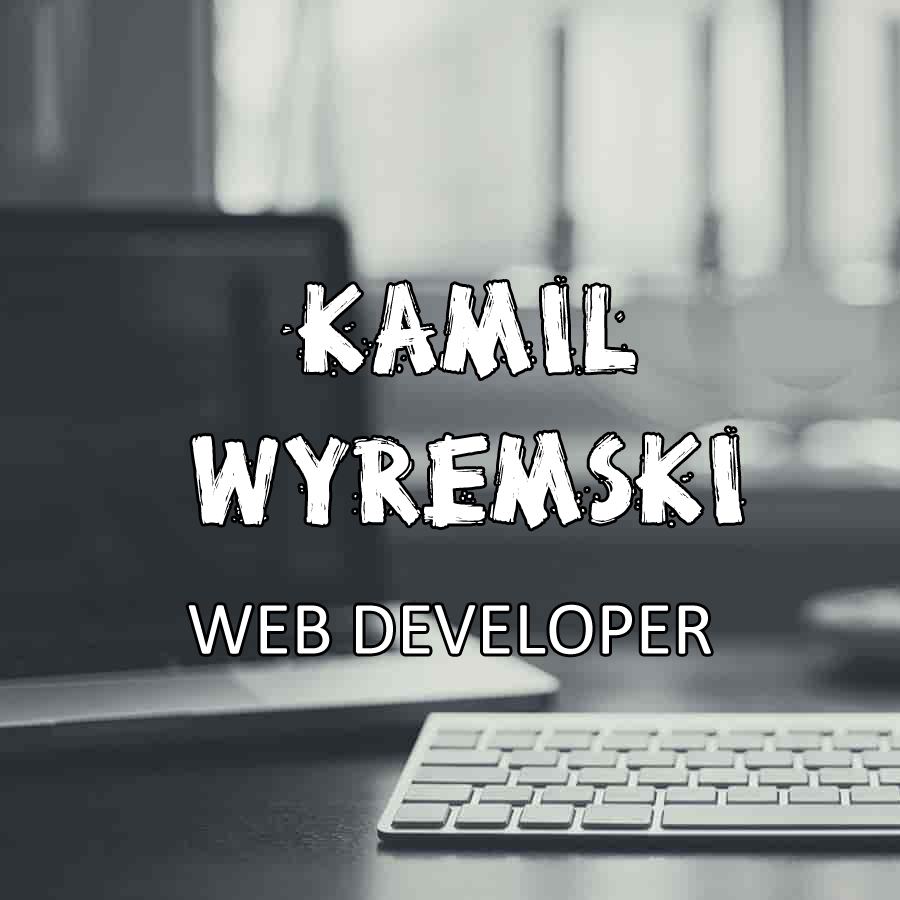
<style>
.page{position:relative;width:900px;height:900px}
.page>*{position:absolute;margin:0}
.t1{font:125.4px "BrokenStick";color:#ffffff}
.t2{font:76px "Calibri";color:#ffffff}
</style>
<div class="page">
<p class="t1" style="left:192px;top:278px;width:552px;height:251px;text-align:center">KAMIL<br>WYREMSKI</p>
<p class="t2" style="left:188px;top:604px;width:523px;height:51px">WEB DEVELOPER</p>
</div>
